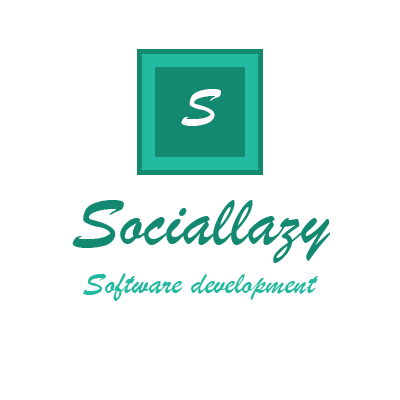
<style>
.page{position:relative;width:400px;height:400px;background:#ffffff}
.page>*{position:absolute;margin:0}
.t1{font:58.3px "BrushScriptMT";color:#ffffff}
.t2{font:75px "BrushScriptMT";color:#138971}
.t3{font:33.3px "BrushScriptMT";color:#22b9a0}
</style>
<div class="page">
<p class="t1" style="left:181px;top:89px;width:40px;height:37px">S</p>
<p class="t2" style="left:72px;top:200px;width:258px;height:63px">Sociallazy</p>
<p class="t3" style="left:83px;top:273px;width:235px;height:28px">Software development</p>
</div>
